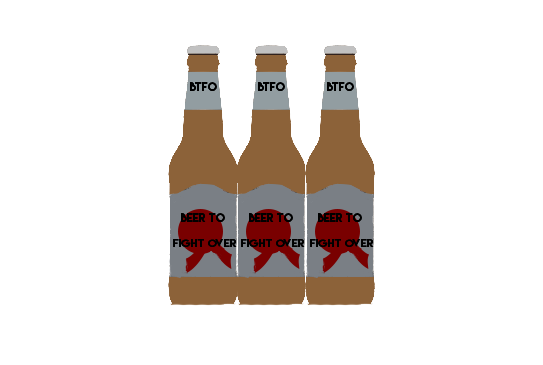
<style>
.page{position:relative;width:543px;height:365px;background:#ffffff}
.page>*{position:absolute;margin:0}
.t1{font:11px "LemonMilk";color:#000000}
.t2{font:9.8px "LemonMilk";color:#000000;scale:1.13 1}
</style>
<div class="page">
<p class="t1" style="left:190px;top:82px;width:27px;height:9px">btfo</p>
<p class="t1" style="left:190px;top:82px;width:27px;height:9px">btfo</p>
<p class="t1" style="left:258px;top:82px;width:27px;height:9px">btfo</p>
<p class="t1" style="left:258px;top:82px;width:27px;height:9px">btfo</p>
<p class="t1" style="left:327px;top:82px;width:27px;height:9px">btfo</p>
<p class="t1" style="left:327px;top:82px;width:27px;height:9px">btfo</p>
<p class="t1" style="left:181px;top:213px;width:44px;height:9px">Beer to</p>
<p class="t1" style="left:181px;top:213px;width:44px;height:9px">Beer to</p>
<p class="t1" style="left:249px;top:213px;width:44px;height:9px">Beer to</p>
<p class="t1" style="left:249px;top:213px;width:44px;height:9px">Beer to</p>
<p class="t1" style="left:318px;top:213px;width:44px;height:9px">Beer to</p>
<p class="t1" style="left:318px;top:213px;width:44px;height:9px">Beer to</p>
<p class="t2" style="left:173px;top:239px;width:64px;height:8px">fight over</p>
<p class="t2" style="left:173px;top:239px;width:64px;height:8px">fight over</p>
<p class="t2" style="left:241px;top:239px;width:64px;height:8px">fight over</p>
<p class="t2" style="left:241px;top:239px;width:64px;height:8px">fight over</p>
<p class="t2" style="left:310px;top:239px;width:64px;height:8px">fight over</p>
<p class="t2" style="left:310px;top:239px;width:64px;height:8px">fight over</p>
</div>
